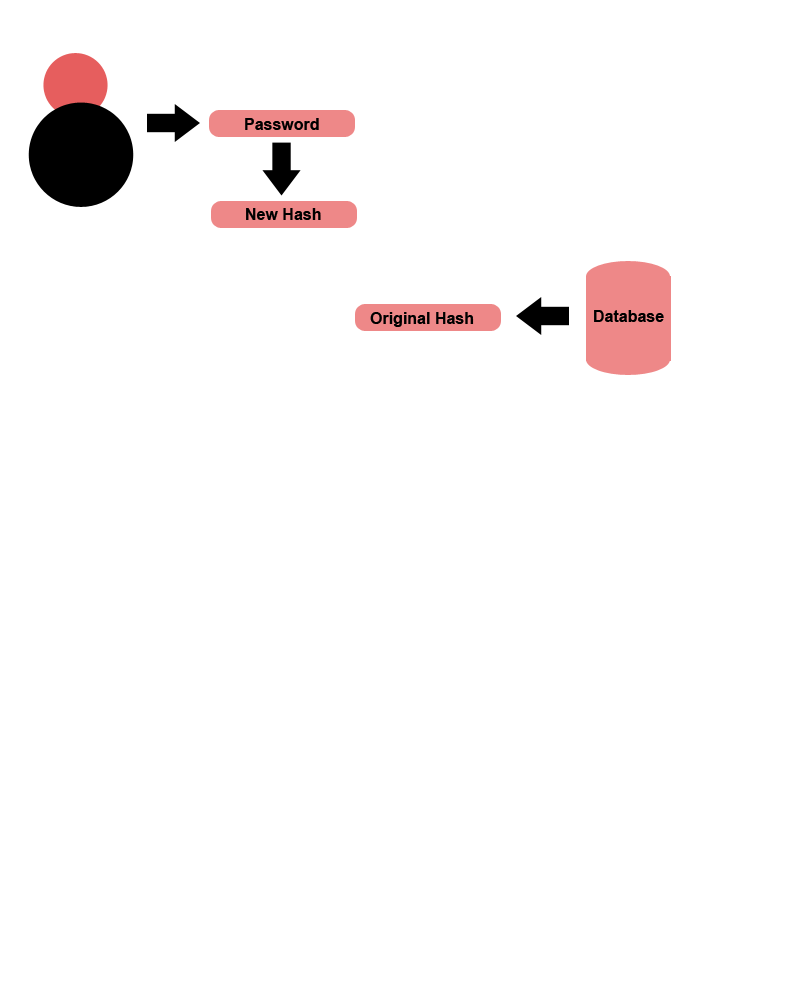
<style>
.page{position:relative;width:800px;height:1000px;background:#ffffff}
.page>*{position:absolute;margin:0}
.t1{font:16px "Arial-BoldMT";color:#000000}
</style>
<div class="page">
<p class="t1" style="left:245px;top:118px;width:74px;height:12px">Password</p>
<p class="t1" style="left:246px;top:208px;width:75px;height:12px">New Hash</p>
<p class="t1" style="left:370px;top:312px;width:104px;height:15px">Original Hash</p>
<p class="t1" style="left:594px;top:310px;width:70px;height:12px">Database</p>
</div>
